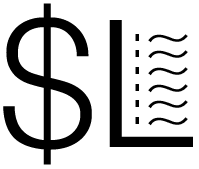
<style>
.page{position:relative;width:199px;height:169px;background:#ffffff}
.page>*{position:absolute;margin:0}
.t1{font:177.8px "HelveticaNeue-Light";color:#000000}
.t2{font:66.7px/16.7px "HelveticaNeue-Thin";color:#000000}
.t3{font:66.7px/16.7px "HelveticaNeue-Thin";letter-spacing:-0.1em;color:#000000;scale:1.3 1}
</style>
<div class="page">
<p class="t1" style="left:3px;top:3px;width:190px;height:162px">$L</p>
<p class="t2" style="left:135px;top:34px;width:4px;height:90px">.<br>.<br>.<br>.<br>.<br>.</p>
<p class="t3" style="left:148px;top:34px;width:40px;height:92px">~<br>~<br>~<br>~<br>~<br>~</p>
</div>
